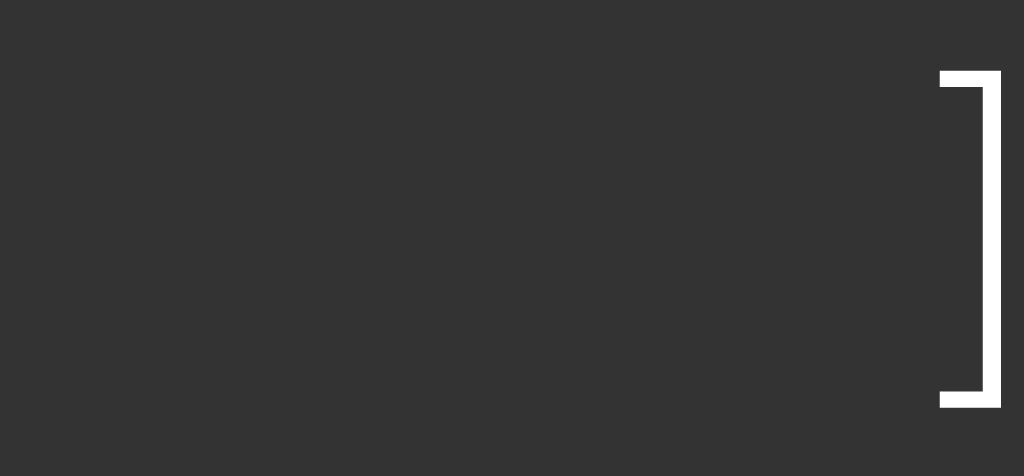
<style>
.page{position:relative;width:1024px;height:476px;background:#333333}
.page>*{position:absolute;margin:0}
.t1{font:362.8px "MicrosoftYaHeiLight";color:#ffffff}
</style>
<div class="page">
<p class="t1" style="left:939px;top:70px;width:62px;height:338px">]</p>
</div>
